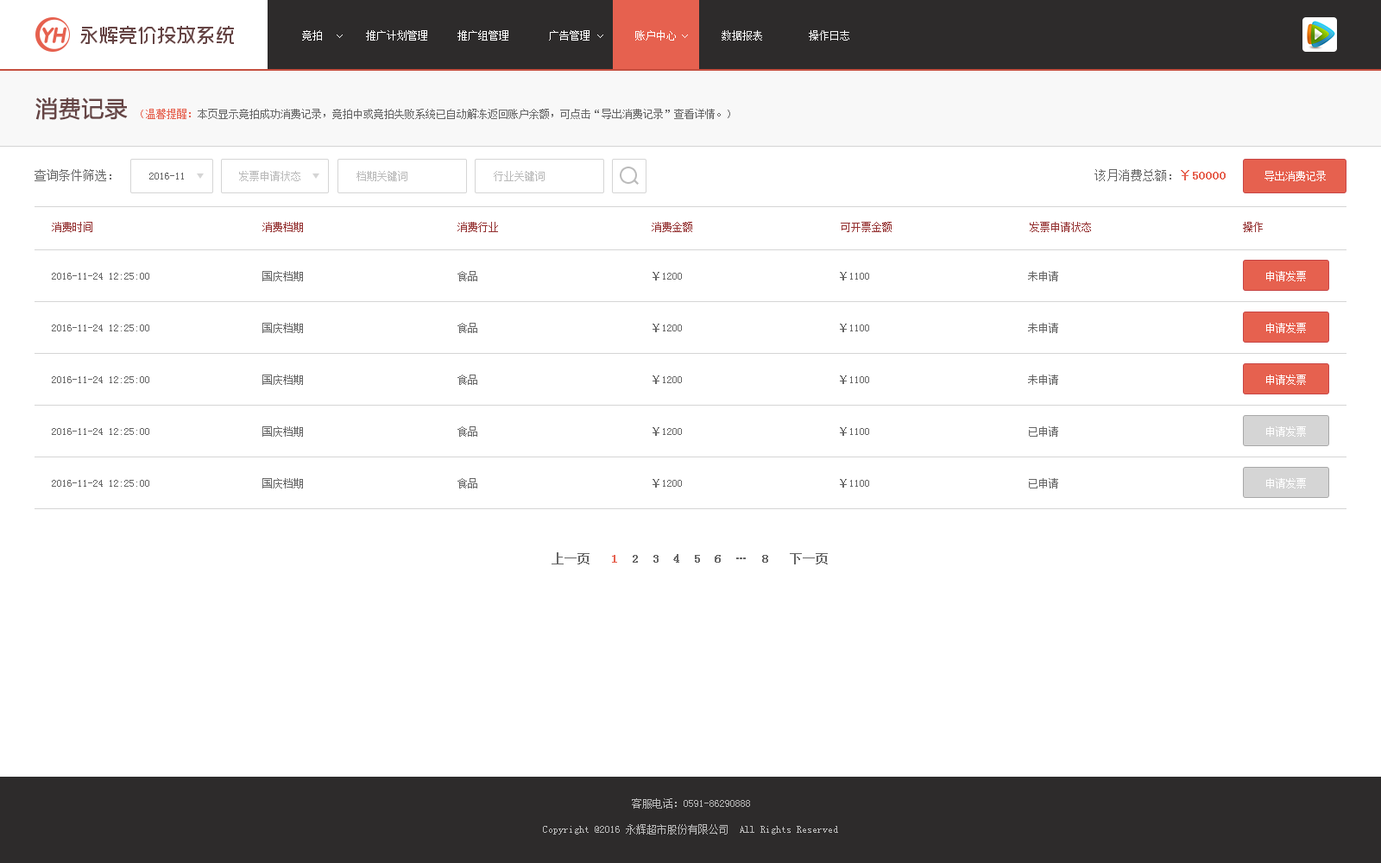
<style>
.page{position:relative;width:1381px;height:863px;background:#ffffff}
.page>*{position:absolute;margin:0}
.t1{font:10.4px "SimSun";color:#ffffff}
.t2{font:10.4px "SimSun";color:#f8f8f8}
.t3{font:22.4px "MicrosoftYaHei";color:#664545;font-weight:bold}
.t4{font:10.4px "SimSun";color:#666666}
.t5{font:10.4px "SimSun";color:#e6614f}
.t6{font:12.1px "SimSun";color:#666666}
.t7{font:10.4px "SimSun";color:#bababa}
.t8{font:12.1px "SimSun";color:#e6614f;font-weight:bold}
.t9{font:10.4px "SimSun";color:#953232}
.t10{font:12.1px "SimSun";color:#666666;font-weight:bold}
</style>
<div class="page">
<p class="t1" style="left:302px;top:30px;width:20px;height:11px">竞拍</p>
<p class="t1" style="left:366px;top:30px;width:61px;height:11px">推广计划管理</p>
<p class="t1" style="left:458px;top:30px;width:50px;height:11px">推广组管理</p>
<p class="t1" style="left:549px;top:30px;width:41px;height:11px">广告管理</p>
<p class="t1" style="left:635px;top:30px;width:41px;height:11px">账户中心</p>
<p class="t1" style="left:635px;top:30px;width:41px;height:11px">账户中心</p>
<p class="t2" style="left:722px;top:30px;width:40px;height:11px">数据报表</p>
<p class="t2" style="left:809px;top:30px;width:40px;height:11px">操作日志</p>
<p class="t3" style="left:35px;top:98px;width:93px;height:22px">消费记录</p>
<p class="t4" style="left:141px;top:109px;width:589px;height:10px"><span class="t5">（温馨提醒：</span>本页显示竞拍成功消费记录，竞拍中或竞拍失败系统已自动解冻返回账户余额，可点击“导出消费记录”查看详情。）</p>
<p class="t6" style="left:35px;top:169px;width:76px;height:12px">查询条件筛选：</p>
<p class="t4" style="left:149px;top:173px;width:35px;height:7px">2016-11</p>
<p class="t7" style="left:239px;top:171px;width:61px;height:10px">发票申请状态</p>
<p class="t7" style="left:357px;top:171px;width:50px;height:10px">档期关键词</p>
<p class="t7" style="left:494px;top:171px;width:51px;height:10px">行业关键词</p>
<p class="t6" style="left:1095px;top:169px;width:131px;height:12px">该月消费总额：<span class="t8">￥50000</span></p>
<p class="t1" style="left:1265px;top:171px;width:61px;height:10px">导出消费记录</p>
<p class="t9" style="left:52px;top:222px;width:40px;height:10px">消费时间</p>
<p class="t9" style="left:262px;top:222px;width:41px;height:10px">消费档期</p>
<p class="t9" style="left:458px;top:222px;width:40px;height:10px">消费行业</p>
<p class="t9" style="left:652px;top:222px;width:40px;height:10px">消费金额</p>
<p class="t9" style="left:841px;top:222px;width:51px;height:10px">可开票金额</p>
<p class="t9" style="left:1030px;top:222px;width:61px;height:10px">发票申请状态</p>
<p class="t9" style="left:1243px;top:222px;width:20px;height:10px">操作</p>
<p class="t4" style="left:52px;top:273px;width:97px;height:7px">2016-11-24 12:25:00</p>
<p class="t4" style="left:262px;top:271px;width:41px;height:10px">国庆档期</p>
<p class="t4" style="left:458px;top:271px;width:19px;height:10px">食品</p>
<p class="t4" style="left:653px;top:272px;width:29px;height:9px">￥1200</p>
<p class="t4" style="left:840px;top:272px;width:29px;height:9px">￥1100</p>
<p class="t4" style="left:1028px;top:271px;width:30px;height:10px">未申请</p>
<p class="t1" style="left:1266px;top:271px;width:40px;height:10px">申请发票</p>
<p class="t4" style="left:52px;top:325px;width:97px;height:7px">2016-11-24 12:25:00</p>
<p class="t4" style="left:262px;top:323px;width:41px;height:10px">国庆档期</p>
<p class="t4" style="left:458px;top:323px;width:19px;height:10px">食品</p>
<p class="t4" style="left:653px;top:324px;width:29px;height:8px">￥1200</p>
<p class="t4" style="left:840px;top:324px;width:29px;height:8px">￥1100</p>
<p class="t4" style="left:1028px;top:323px;width:30px;height:10px">未申请</p>
<p class="t1" style="left:1266px;top:323px;width:40px;height:10px">申请发票</p>
<p class="t4" style="left:52px;top:376px;width:97px;height:7px">2016-11-24 12:25:00</p>
<p class="t4" style="left:262px;top:375px;width:41px;height:10px">国庆档期</p>
<p class="t4" style="left:458px;top:375px;width:19px;height:10px">食品</p>
<p class="t4" style="left:653px;top:376px;width:29px;height:8px">￥1200</p>
<p class="t4" style="left:840px;top:376px;width:29px;height:8px">￥1100</p>
<p class="t4" style="left:1028px;top:375px;width:30px;height:10px">未申请</p>
<p class="t1" style="left:1266px;top:375px;width:40px;height:10px">申请发票</p>
<p class="t4" style="left:52px;top:428px;width:97px;height:7px">2016-11-24 12:25:00</p>
<p class="t4" style="left:262px;top:426px;width:41px;height:11px">国庆档期</p>
<p class="t4" style="left:458px;top:426px;width:19px;height:11px">食品</p>
<p class="t4" style="left:653px;top:427px;width:29px;height:9px">￥1200</p>
<p class="t4" style="left:840px;top:427px;width:29px;height:9px">￥1100</p>
<p class="t4" style="left:1029px;top:426px;width:29px;height:11px">已申请</p>
<p class="t1" style="left:1266px;top:426px;width:40px;height:11px">申请发票</p>
<p class="t4" style="left:52px;top:480px;width:97px;height:7px">2016-11-24 12:25:00</p>
<p class="t4" style="left:262px;top:478px;width:41px;height:11px">国庆档期</p>
<p class="t4" style="left:458px;top:478px;width:19px;height:11px">食品</p>
<p class="t4" style="left:653px;top:479px;width:29px;height:9px">￥1200</p>
<p class="t4" style="left:840px;top:479px;width:29px;height:9px">￥1100</p>
<p class="t4" style="left:1029px;top:478px;width:29px;height:11px">已申请</p>
<p class="t1" style="left:1266px;top:478px;width:40px;height:11px">申请发票</p>
<p class="t10" style="left:552px;top:553px;width:276px;height:12px">上一页   <span class="t8">1  </span>2  3  4  5  6  …  8   下一页</p>
<p class="t7" style="left:632px;top:799px;width:118px;height:10px">客服电话：0591-86290888</p>
<p class="t7" style="left:543px;top:824px;width:295px;height:11px">Copyright @2016 永辉超市股份有限公司  All Rights Reserved</p>
</div>
